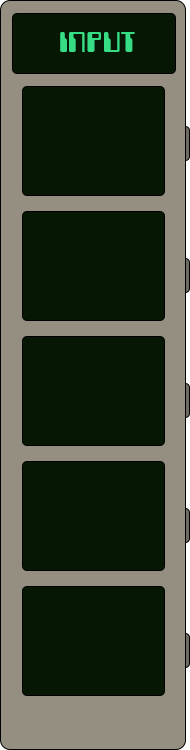
<style>
.page{position:relative;width:190px;height:750px;background:#061804}
.page>*{position:absolute;margin:0}
.t1{font:33.3px "Computerfont";color:#37dd85}
</style>
<div class="page">
<p class="t1" style="left:60px;top:32px;width:75px;height:20px">INPUT</p>
</div>
